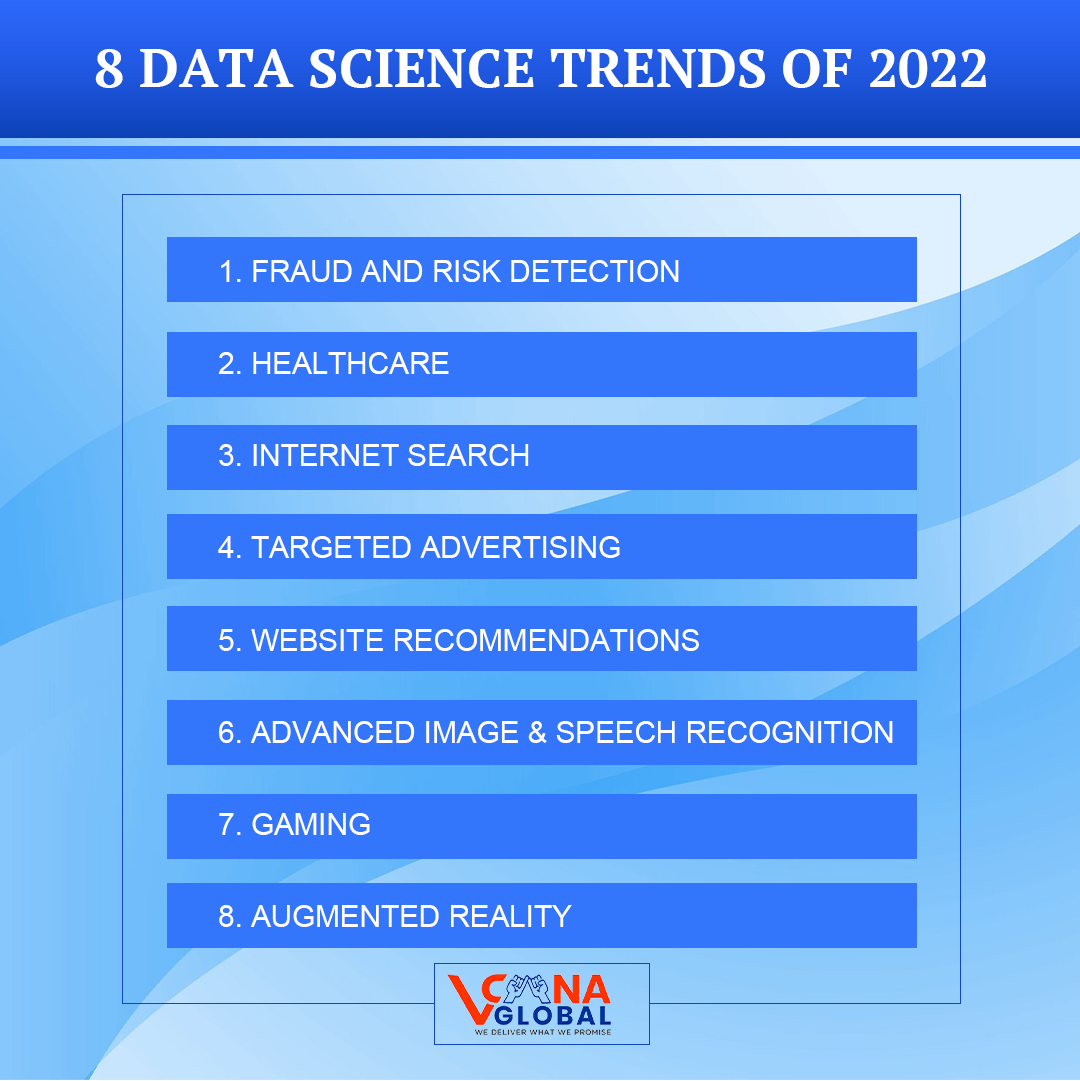
<style>
.page{position:relative;width:1080px;height:1081px;background:#3476fb}
.page>*{position:absolute;margin:0}
.t1{font:54px "PTSerif-Bold";color:#ffffff;text-transform:uppercase}
.t2{font:29.6px/92.1px "ArialMT";color:#ffffff;text-transform:uppercase}
</style>
<div class="page">
<p class="t1" style="left:95px;top:49px;width:891px;height:39px">8 Data Science Trends of 2022</p>
<p class="t2" style="left:218px;top:260px;width:675px;height:667px">1. Fraud and Risk Detection<br>2. Healthcare<br>3. Internet Search<br>4. Targeted Advertising<br>5. Website Recommendations<br>6. Advanced Image &amp; Speech Recognition<br>7. Gaming<br>8. Augmented Reality</p>
</div>
